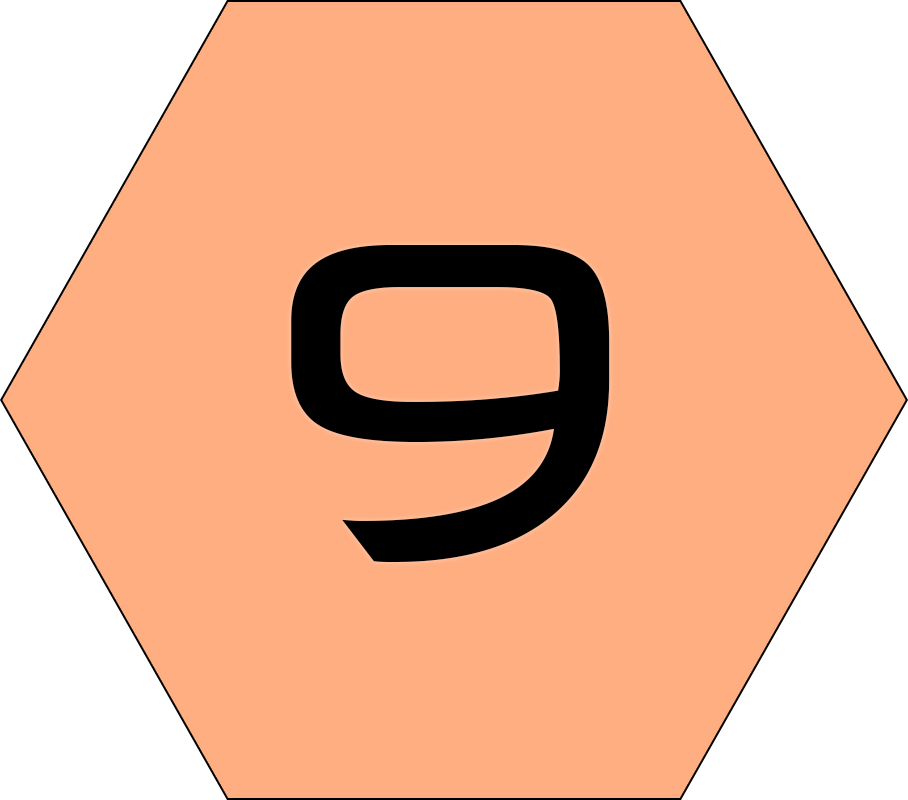
<style>
.page{position:relative;width:908px;height:800px;background:#ffae82}
.page>*{position:absolute;margin:0}
.t1{font:600px "BankGothicBT-Light";color:#000000}
</style>
<div class="page">
<p class="t1" style="left:291px;top:245px;width:319px;height:317px">9</p>
</div>
